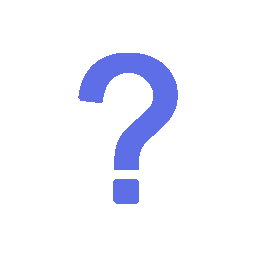
<style>
.page{position:relative;width:257px;height:257px;background:#ffffff}
.page>*{position:absolute;margin:0}
.t1{font:200px "ArialMT";color:#5e6ee7;font-weight:bold}
</style>
<div class="page">
<p class="t1" style="left:78px;top:53px;width:100px;height:151px">?</p>
</div>
